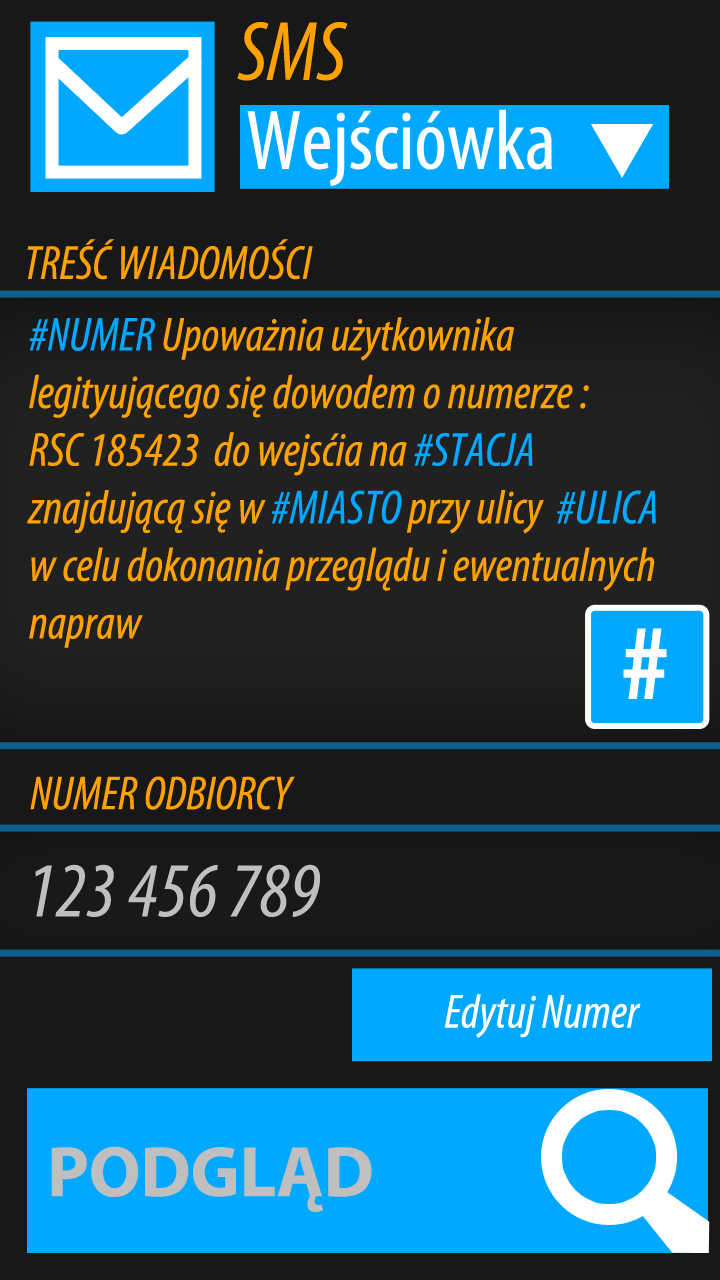
<style>
.page{position:relative;width:720px;height:1280px;background:#181818}
.page>*{position:absolute;margin:0}
.t1{font:85px "MyriadPro-CondIt";color:#ffa200}
.t2{font:169px "MyriadPro-CondIt";color:#ffa200}
.t3{font:85px "MyriadPro-Cond";color:#ffffff}
.t4{font:48px "MyriadPro-CondIt";color:#ffa200}
.t5{font:48px "MyriadPro-CondIt";color:#00a8ff}
.t6{font:108px "MyriadPro-BoldCond";color:#ffffff}
.t7{font:78px "MyriadPro-CondIt";color:#bfbfbf}
.t8{font:48px "MyriadPro-CondIt";color:#ffffff}
.t9{font:72px "MyriadPro-Bold";color:#bfbfbf}
</style>
<div class="page">
<p class="t1" style="left:237px;top:22px;width:111px;height:59px"><span class="t2"><br></span>SMS</p>
<p class="t3" style="left:247px;top:109px;width:305px;height:77px">Wejściówka</p>
<p class="t4" style="left:27px;top:239px;width:286px;height:41px">TREŚĆ WIADOMOŚCI</p>
<p class="t4" style="left:27px;top:317px;width:629px;height:331px"><span class="t5">#NUMER </span>Upoważnia użytkownika legityującego się dowodem o numerze :<br>RSC 185423  do wejsćia na <span class="t5">#STACJA<br></span>znajdującą się w <span class="t5">#MIASTO </span>przy ulicy  <span class="t5">#ULICA </span>w celu dokonania przeglądu i ewentualnych napraw</p>
<p class="t6" style="left:623px;top:628px;width:44px;height:71px">#</p>
<p class="t4" style="left:30px;top:776px;width:265px;height:34px">NUMER ODBIORCY</p>
<p class="t7" style="left:35px;top:864px;width:285px;height:53px">123 456 789</p>
<p class="t8" style="left:444px;top:994px;width:197px;height:44px">Edytuj Numer</p>
<p class="t9" style="left:51px;top:1146px;width:321px;height:66px">PODGLĄD</p>
</div>
